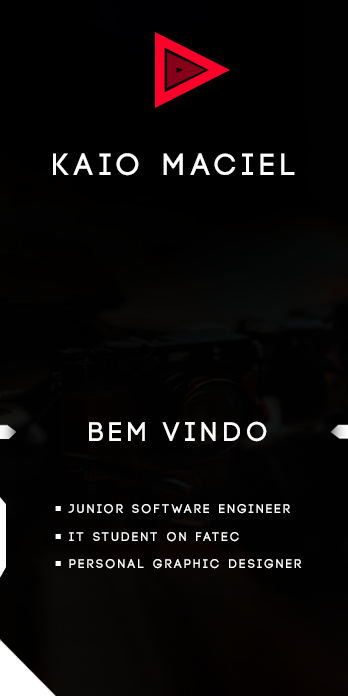
<style>
.page{position:relative;width:348px;height:696px}
.page>*{position:absolute;margin:0}
.t1{font:30.7px "Code-Bold";letter-spacing:0.2em;color:#ffffff}
.t2{font:27.1px "Code-Bold";letter-spacing:0.2em;color:#ffffff}
.t3{font:12.7px/27.6px "Code-Bold";letter-spacing:0.2em;color:#ffffff}
.t4{font:12.7px/27.6px "Chainwhacks";letter-spacing:0.2em;color:#ffffff}
</style>
<div class="page">
<p class="t1" style="left:53px;top:153px;width:242px;height:23px">kaio maciel</p>
<p class="t2" style="left:89px;top:421px;width:178px;height:21px">bem vindo</p>
<p class="t3" style="left:55px;top:504px;width:247px;height:65px"><span class="t4">• </span>JUNIOR SOFTWARE ENGINEER<br><span class="t4">• </span>IT STUDENT ON FATEC<br><span class="t4">• </span>PERSONAL GRAPHIC DESIGNER</p>
</div>
